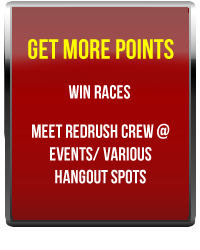
<style>
.page{position:relative;width:200px;height:250px}
.page>*{position:absolute;margin:0}
.t1{font:28px "BebasNeue";color:#ffff00}
.t2{font:19px "BebasNeue";color:#ffffff}
</style>
<div class="page">
<p class="t1" style="left:28px;top:39px;width:146px;height:20px">Get more points</p>
<p class="t2" style="left:68px;top:85px;width:63px;height:14px">Win Races</p>
<p class="t2" style="left:32px;top:123px;width:138px;height:61px;text-align:center">Meet RedRush Crew @ events/ various <br>hangout spots</p>
</div>
